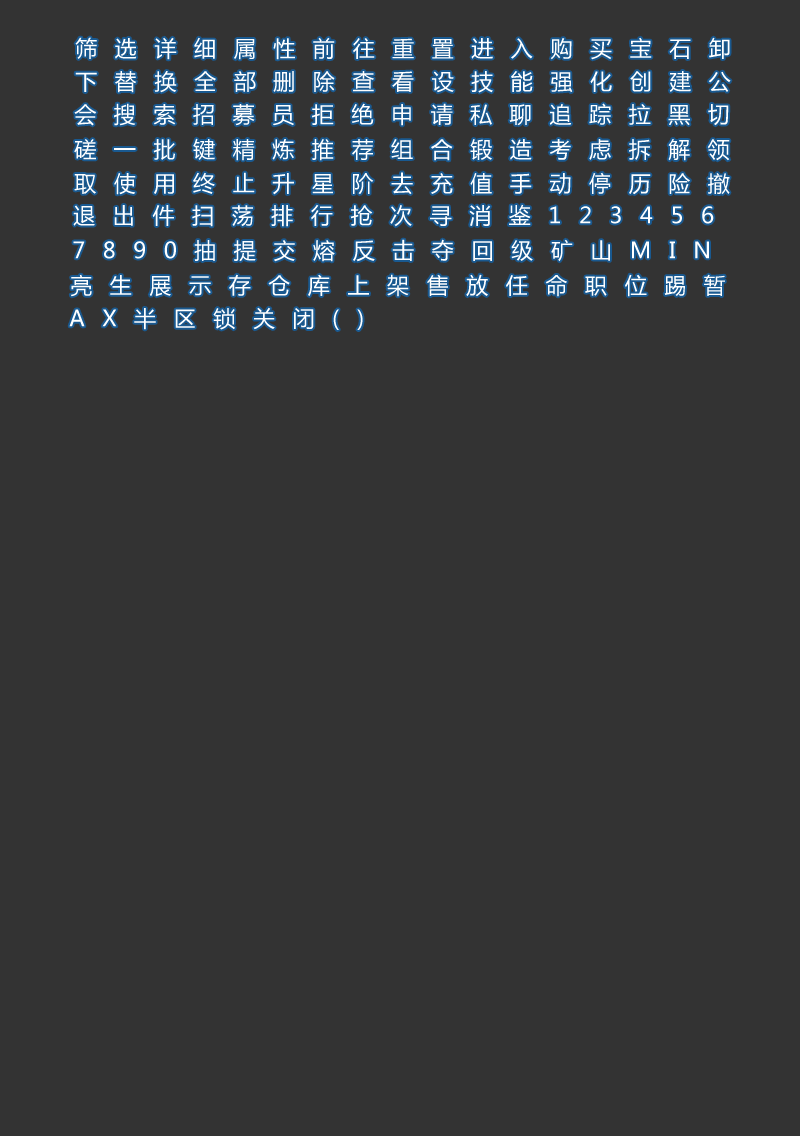
<style>
.page{position:relative;width:800px;height:1136px;background:#333333}
.page>*{position:absolute;margin:0}
.t1{font:22px "MicrosoftYaHei";letter-spacing:0.8em;color:#ffffff}
</style>
<div class="page">
<p class="t1" style="left:75px;top:37px;width:655px;height:23px">筛选详细属性前往重置进入购买宝石卸</p>
<p class="t1" style="left:75px;top:71px;width:656px;height:22px">下替换全部删除查看设技能强化创建公</p>
<p class="t1" style="left:74px;top:103px;width:655px;height:23px">会搜索招募员拒绝申请私聊追踪拉黑切</p>
<p class="t1" style="left:74px;top:138px;width:656px;height:23px">磋一批键精炼推荐组合锻造考虑拆解领</p>
<p class="t1" style="left:74px;top:172px;width:656px;height:23px">取使用终止升星阶去充值手动停历险撤</p>
<p class="t1" style="left:73px;top:204px;width:641px;height:23px">退出件扫荡排行抢次寻消鉴123456</p>
<p class="t1" style="left:73px;top:239px;width:636px;height:23px">7890抽提交熔反击夺回级矿山MIN</p>
<p class="t1" style="left:70px;top:274px;width:655px;height:23px">亮生展示存仓库上架售放任命职位踢暂</p>
<p class="t1" style="left:69px;top:307px;width:294px;height:23px">AX半区锁关闭()</p>
</div>
